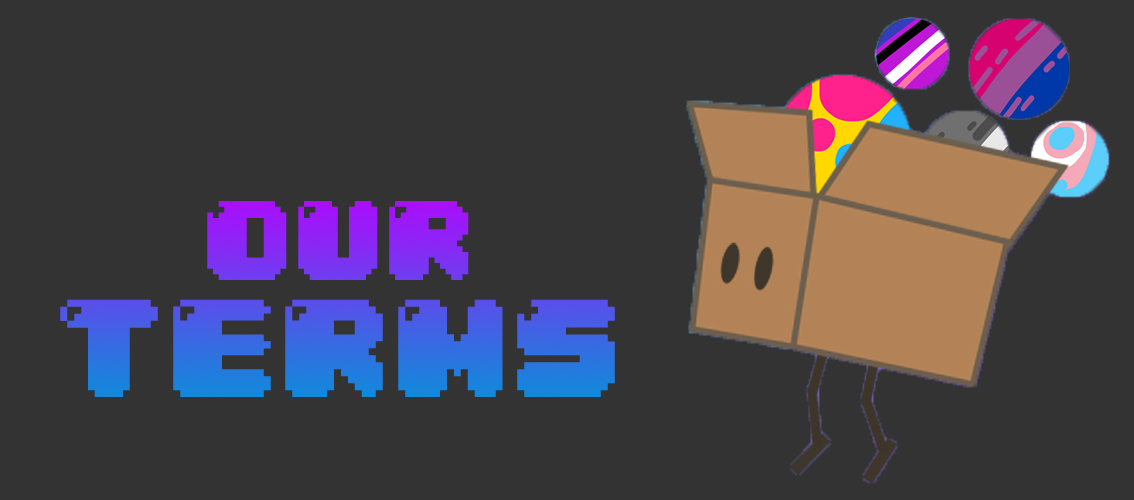
<style>
.page{position:relative;width:1134px;height:500px;background:#333333}
.page>*{position:absolute;margin:0}
.t1{font:95.9px "04b30";letter-spacing:0.01em;color:#8c26f5}
.t2{font:118.1px "04b30";letter-spacing:0.01em}
</style>
<div class="page">
<p class="t1" style="left:207px;top:201px;width:262px;height:79px">OUR</p>
<p class="t2" style="left:60px;top:299px;width:555px;height:98px">TERMS</p>
</div>
